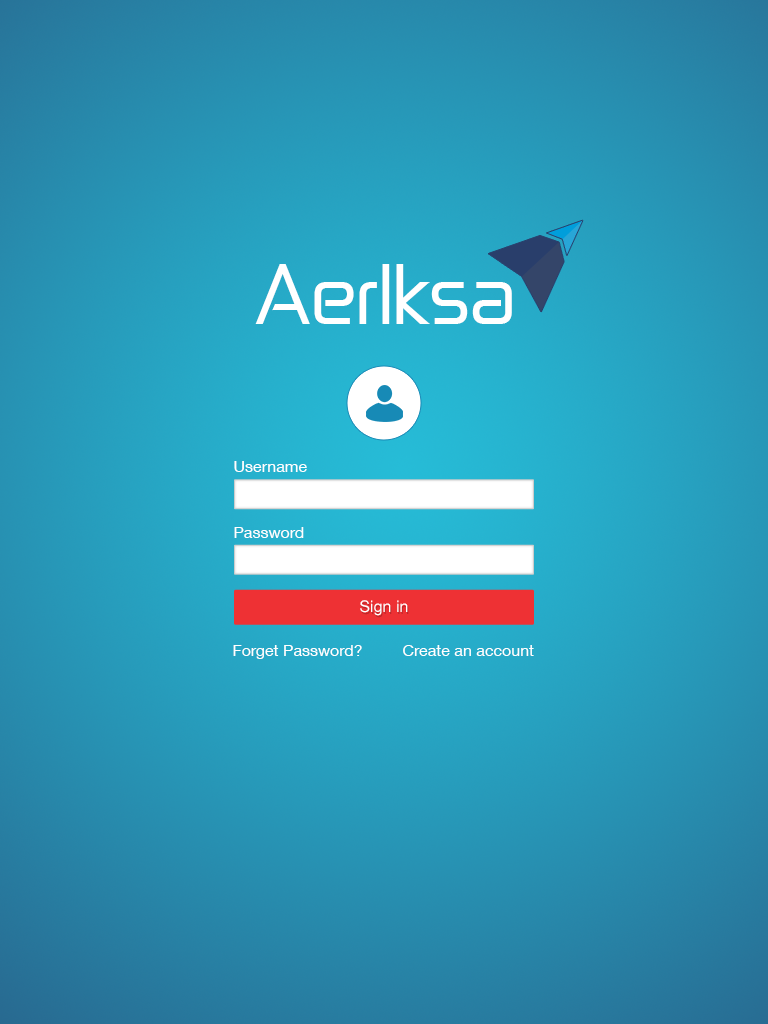
<style>
.page{position:relative;width:768px;height:1024px}
.page>*{position:absolute;margin:0}
.t1{font:72px "Zekton";color:#ffffff}
.t2{font:16px "HelveticaNeueLTCom-Roman";color:#ffffff}
</style>
<div class="page">
<p class="t1" style="left:255px;top:264px;width:257px;height:60px">AerIksa</p>
<p class="t2" style="left:234px;top:461px;width:73px;height:11px">Username</p>
<p class="t2" style="left:234px;top:527px;width:70px;height:11px">Password</p>
<p class="t2" style="left:360px;top:600px;width:48px;height:16px">Sign in</p>
<p class="t2" style="left:233px;top:645px;width:129px;height:14px">Forget Password?</p>
<p class="t2" style="left:403px;top:645px;width:131px;height:11px">Create an account</p>
</div>
